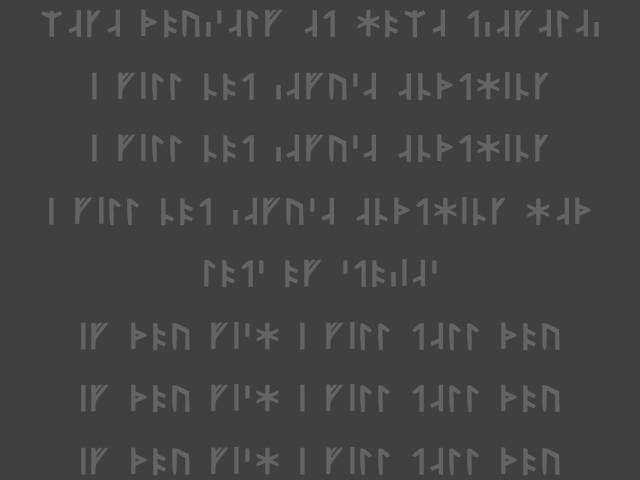
<style>
.page{position:relative;width:640px;height:480px;background:#404040}
.page>*{position:absolute;margin:0}
.t1{font:52.2px "YoungerFutharkShortTwigMad-Rg";color:#646464;scale:1.21 1}
</style>
<div class="page">
<p class="t1" style="left:41px;top:9px;width:558px;height:467px;text-align:center">Make yourself at home traveler<br>I will not refuse anything<br>I will not refuse anything<br>I will not refuse anything Hey<br>Lots of stories<br>If you wish I will tell you<br>If you wish I will tell you<br>If you wish I will tell you</p>
</div>
